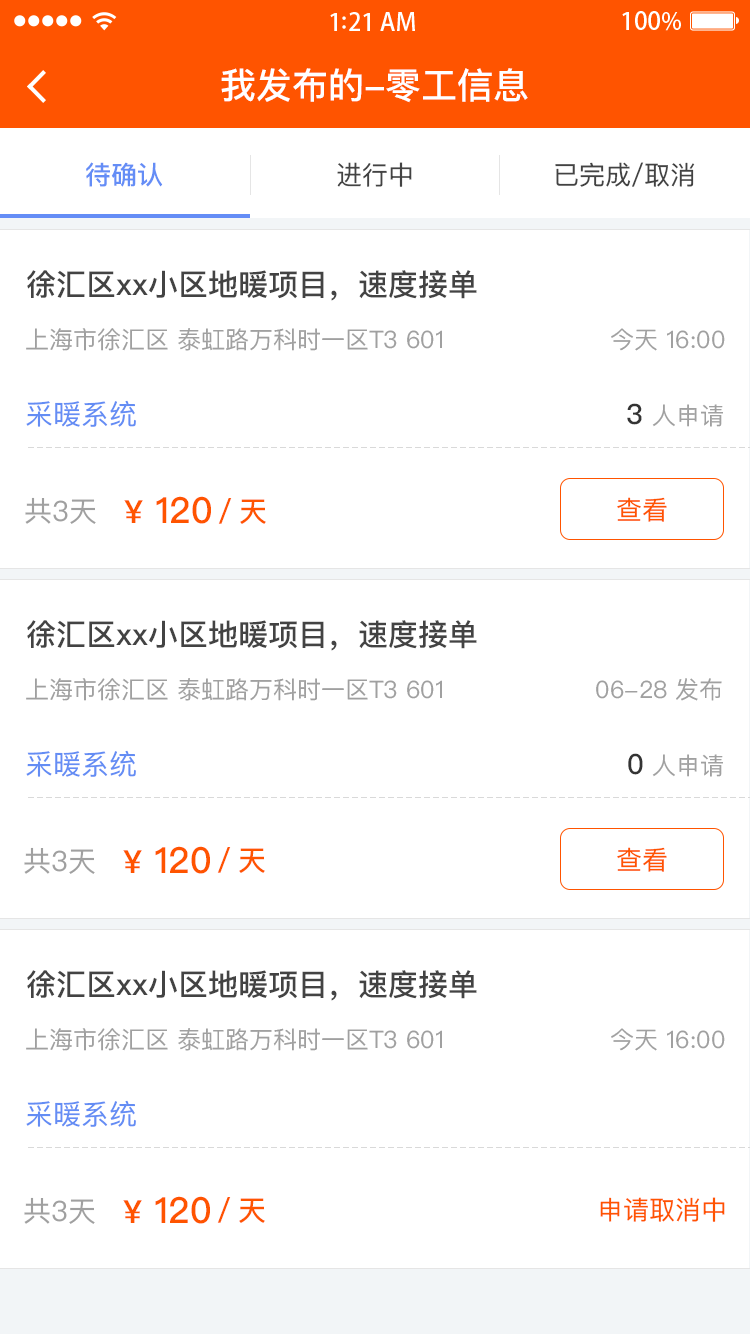
<style>
.page{position:relative;width:750px;height:1334px;background:#ffffff}
.page>*{position:absolute;margin:0}
.t1{font:36px "PingFangSC-Medium";color:#ffffff}
.t2{font:26px "PingFangSC-Medium";color:#648df6}
.t3{font:26px "PingFangSC-Regular";color:#434343}
.t4{font:30px "PingFangSC-Medium";color:#434343}
.t5{font:24px "PingFangSC-Regular";color:#a0a0a0}
.t6{font:28px "PingFangSC-Regular";color:#648df4}
.t7{font:28px "PingFangSC-Medium";color:#343434}
.t8{font:28px "PingFangSC-Regular";color:#a0a0a0}
.t9{font:36px "PingFangSC-Medium";color:#ff5400}
.t10{font:32px "PingFangSC-Medium";color:#ff5400}
.t11{font:26px "PingFangSC-Regular";color:#ff5400}
.t12{font:28px "PingFangSC-Medium";color:#ff5400}
</style>
<div class="page">
<p class="t1" style="left:221px;top:68px;width:307px;height:35px">我发布的-零工信息</p>
<p class="t2" style="left:86px;top:162px;width:77px;height:25px">待确认</p>
<p class="t3" style="left:337px;top:162px;width:75px;height:25px">进行中</p>
<p class="t3" style="left:555px;top:162px;width:140px;height:25px">已完成/取消</p>
<p class="t4" style="left:27px;top:270px;width:450px;height:31px">徐汇区xx小区地暖项目，速度接单</p>
<p class="t5" style="left:26px;top:328px;width:416px;height:23px">上海市徐汇区 泰虹路万科时一区T3 601</p>
<p class="t5" style="left:611px;top:328px;width:114px;height:23px">今天 16:00</p>
<p class="t6" style="left:26px;top:400px;width:110px;height:27px">采暖系统</p>
<p class="t5" style="left:627px;top:403px;width:96px;height:24px"><span class="t7">3 </span>人申请</p>
<p class="t8" style="left:25px;top:497px;width:71px;height:27px">共3天</p>
<p class="t9" style="left:124px;top:496px;width:87px;height:28px"><span class="t10">¥</span> 120</p>
<p class="t11" style="left:617px;top:497px;width:50px;height:25px">查看</p>
<p class="t12" style="left:218px;top:498px;width:48px;height:26px">／天</p>
<p class="t4" style="left:27px;top:620px;width:450px;height:31px">徐汇区xx小区地暖项目，速度接单</p>
<p class="t5" style="left:26px;top:678px;width:416px;height:23px">上海市徐汇区 泰虹路万科时一区T3 601</p>
<p class="t5" style="left:596px;top:678px;width:126px;height:23px">06-28 发布</p>
<p class="t6" style="left:26px;top:750px;width:110px;height:27px">采暖系统</p>
<p class="t5" style="left:628px;top:753px;width:95px;height:24px"><span class="t7">0</span> 人申请</p>
<p class="t9" style="left:123px;top:846px;width:87px;height:28px"><span class="t10">¥</span> 120</p>
<p class="t8" style="left:24px;top:847px;width:71px;height:27px">共3天</p>
<p class="t12" style="left:217px;top:847px;width:48px;height:26px">／天</p>
<p class="t11" style="left:617px;top:847px;width:50px;height:25px">查看</p>
<p class="t4" style="left:27px;top:970px;width:450px;height:31px">徐汇区xx小区地暖项目，速度接单</p>
<p class="t5" style="left:26px;top:1028px;width:416px;height:23px">上海市徐汇区 泰虹路万科时一区T3 601</p>
<p class="t5" style="left:611px;top:1028px;width:114px;height:23px">今天 16:00</p>
<p class="t6" style="left:26px;top:1100px;width:110px;height:27px">采暖系统</p>
<p class="t8" style="left:24px;top:1197px;width:71px;height:27px">共3天</p>
<p class="t9" style="left:123px;top:1196px;width:87px;height:28px"><span class="t10">¥</span> 120</p>
<p class="t12" style="left:217px;top:1197px;width:48px;height:26px">／天</p>
<p class="t11" style="left:600px;top:1197px;width:125px;height:25px">申请取消中</p>
</div>
